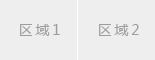
<style>
.page{position:relative;width:155px;height:60px;background:#eeeeee}
.page>*{position:absolute;margin:0}
.t1{font:14px "MicrosoftYaHei";letter-spacing:0.2em;color:#9c9c9c}
</style>
<div class="page">
<p class="t1" style="left:20px;top:24px;width:40px;height:12px">区域1</p>
<p class="t1" style="left:99px;top:24px;width:40px;height:12px">区域2</p>
</div>
